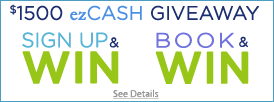
<style>
.page{position:relative;width:274px;height:102px;background:#ffffff}
.page>*{position:absolute;margin:0}
.t1{font:18.9px "Gotham-Light";font-weight:bold}
.t2{font:18.9px "Garamond";font-weight:bold}
.t3{font:20.2px "Gotham-Light";letter-spacing:-0.015em;color:#58b5d7;font-weight:bold}
.t4{font:13.4px "Gotham-Light";color:#0d306d;font-weight:bold}
.t5{font:20.2px "Gotham-Light";letter-spacing:0.1em;color:#7073de;font-weight:bold;scale:1.12 1}
.t6{font:13.4px "Gotham-Light";letter-spacing:0.05em;color:#0d306d;font-weight:bold}
.t7{font:43.9px "Gotham-Medium";color:#98c618;font-weight:bold}
.t8{font:43.9px "Gotham-Medium";color:#98c618;font-weight:bold;scale:0.96 1}
.t9{font:10px "MyriadPro-Regular";color:#969696;text-decoration:underline}
</style>
<div class="page">
<p class="t1" style="left:10px;top:4px;width:249px;height:17px">$1500 <span class="t2">ez</span>CASH GIVEAWAY</p>
<p class="t3" style="left:22px;top:32px;width:86px;height:16px">SIGN UP</p>
<p class="t4" style="left:109px;top:37px;width:10px;height:11px">&amp;</p>
<p class="t5" style="left:156px;top:32px;width:78px;height:16px">BOOK</p>
<p class="t6" style="left:239px;top:36px;width:9px;height:12px">&amp;</p>
<p class="t7" style="left:22px;top:51px;width:97px;height:33px">WIN</p>
<p class="t8" style="left:155px;top:51px;width:94px;height:33px">WIN</p>
<p class="t9" style="left:113px;top:89px;width:46px;height:10px">See Details</p>
</div>
